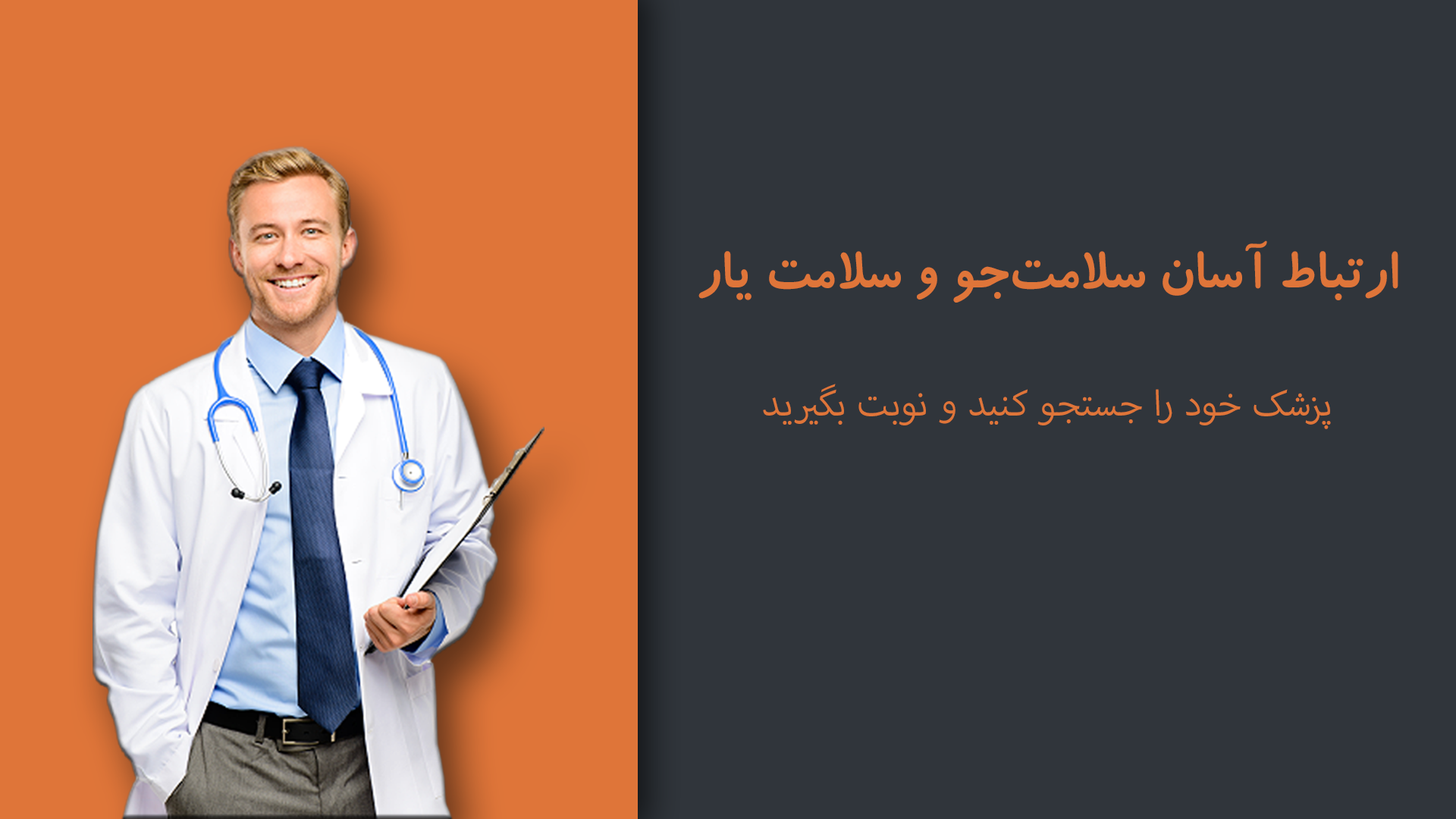
<style>
.page{position:relative;width:1456px;height:819px;background:#30353b}
.page>*{position:absolute;margin:0}
.t1{font:60px "BKoodakBold";color:#df7539}
.t2{font:50.6px "MyriadArabic-Regular";color:#df7539}
</style>
<div class="page">
<p class="t1" style="left:698px;top:240px;width:700px;height:63px">ارتباط آسان سلامت‌جو و سلامت یار</p>
<p class="t2" style="left:763px;top:384px;width:568px;height:45px">پزشک خود را جستجو کنید و نوبت بگیرید</p>
</div>
